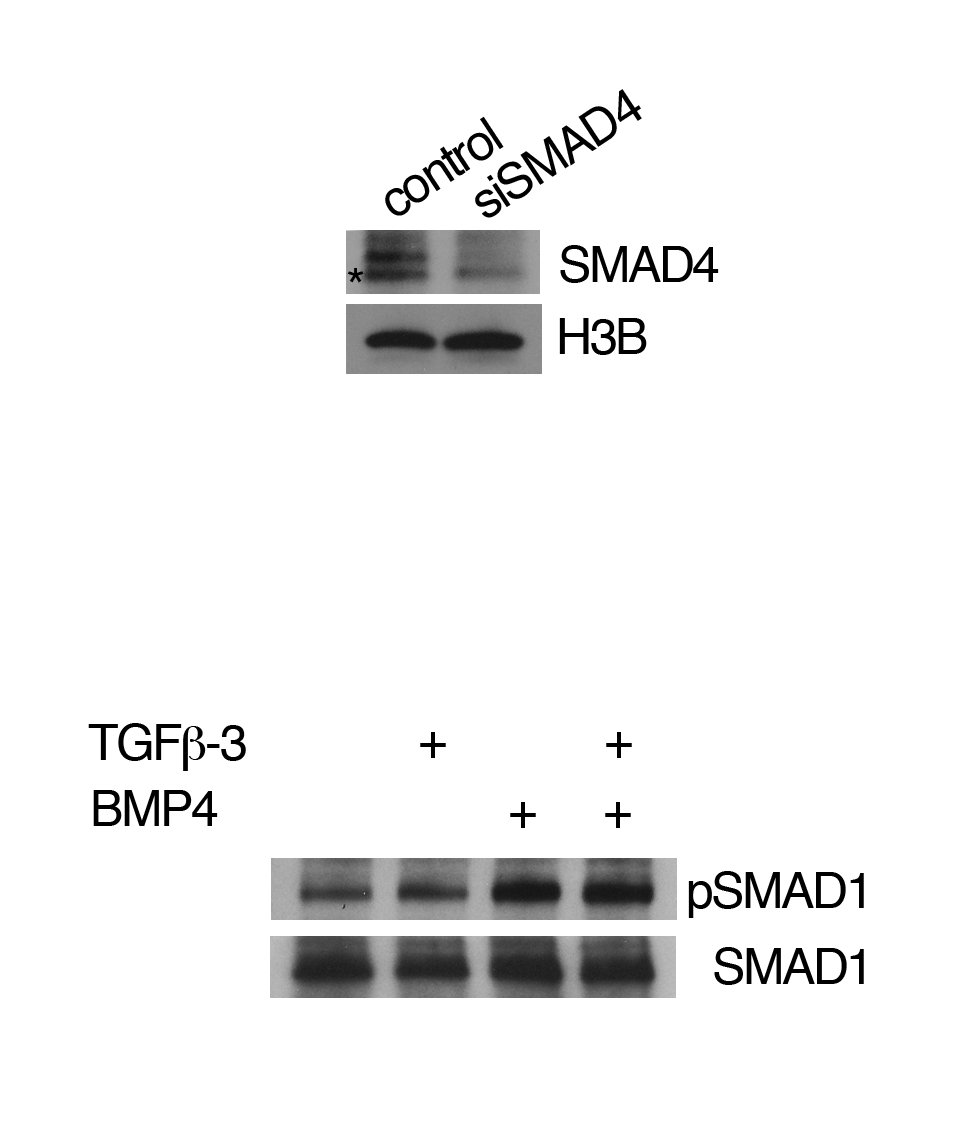
<style>
.page{position:relative;width:980px;height:1136px;background:#ffffff}
.page>*{position:absolute;margin:0}
.t1{font:50px "Helvetica";letter-spacing:-0.05em;color:#000000}
.t2{font:50px "Symbol";letter-spacing:-0.05em;color:#000000}
</style>
<div class="page">
<p class="t1" style="left:475px;top:89px;width:167px;height:129px;rotate:-33deg">siSMAD4</p>
<p class="t1" style="left:385px;top:116px;width:119px;height:100px;rotate:-33deg">control</p>
<p class="t1" style="left:560px;top:245px;width:159px;height:38px">SMAD4</p>
<p class="t1" style="left:347px;top:268px;width:17px;height:15px">*</p>
<p class="t1" style="left:559px;top:318px;width:88px;height:37px">H3B</p>
<p class="t1" style="left:88px;top:723px;width:158px;height:48px">TGF<span class="t2">b</span>-3</p>
<p class="t1" style="left:420px;top:732px;width:212px;height:26px">+              +</p>
<p class="t1" style="left:93px;top:790px;width:125px;height:36px">BMP4</p>
<p class="t1" style="left:510px;top:802px;width:121px;height:26px">+      +</p>
<p class="t1" style="left:688px;top:871px;width:176px;height:47px">pSMAD1</p>
<p class="t1" style="left:714px;top:947px;width:150px;height:38px">SMAD1</p>
</div>
